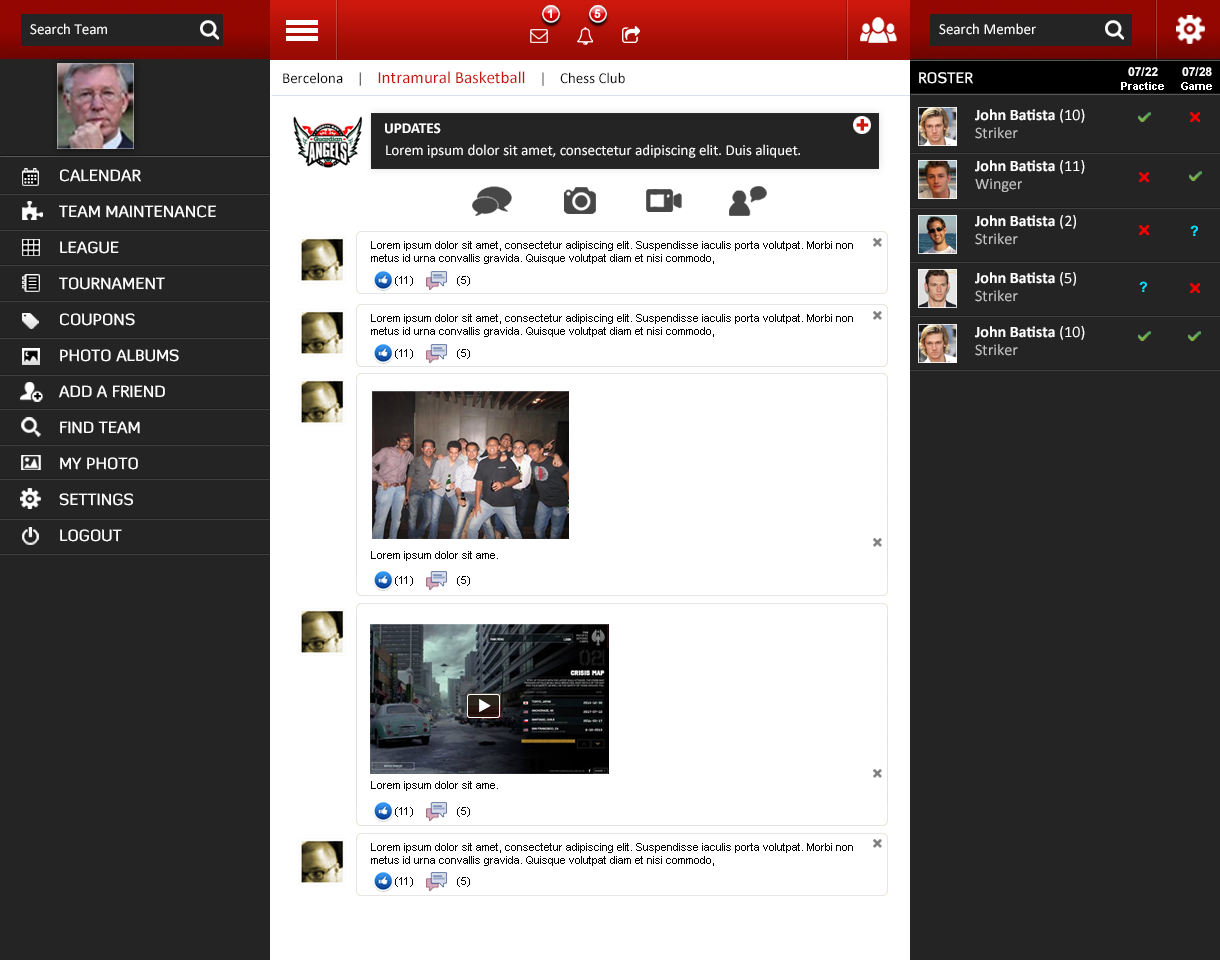
<style>
.page{position:relative;width:1220px;height:960px;background:#242424}
.page>*{position:absolute;margin:0}
.t1{font:12px "Arial-BoldMT";color:#ffffff}
.t2{font:15px "Calibri";color:#ffffff}
.t3{font:17px "Calibri";color:#c6160c}
.t4{font:15px "Calibri";color:#000000}
.t5{font:15px "DiavloMedium-Regular";color:#ffffff;text-transform:uppercase}
.t6{font:11px "Arial-BoldMT";color:#ffffff}
.t7{font:16px "Calibri-Bold";color:#ffffff}
.t8{font:16px "Calibri";color:#ffffff}
.t9{font:15px "Calibri-Bold";color:#ffffff;text-transform:uppercase}
.t10{font:22px "Arial-Black";color:#ce180d;text-transform:uppercase}
.t11{font:16px "Calibri";color:#c4c4c4}
.t12{font:16px/36px "DiavloMedium-Regular";color:#ffffff;text-transform:uppercase}
.t13{font:14px "Arial-BoldMT";color:#00e4ff}
.t14{font:11px "ArialMT";color:#000000}
</style>
<div class="page">
<p class="t1" style="left:548px;top:9px;width:4px;height:9px">1</p>
<p class="t1" style="left:594px;top:9px;width:7px;height:9px">5</p>
<p class="t2" style="left:30px;top:23px;width:77px;height:12px">Search Team</p>
<p class="t2" style="left:939px;top:23px;width:97px;height:12px">Search Member</p>
<p class="t3" style="left:283px;top:71px;width:342px;height:15px"><span class="t4">Bercelona    |    </span>Intramural Basketball <span class="t4">   |    Chess Club</span></p>
<p class="t5" style="left:919px;top:72px;width:54px;height:12px">ROSTER</p>
<p class="t1" style="left:1128px;top:67px;width:30px;height:9px">07/22</p>
<p class="t1" style="left:1182px;top:67px;width:30px;height:9px">07/28</p>
<p class="t6" style="left:1121px;top:82px;width:43px;height:8px">Practice</p>
<p class="t6" style="left:1181px;top:82px;width:31px;height:8px">Game</p>
<p class="t7" style="left:975px;top:109px;width:110px;height:14px">John Batista<span class="t8"> (10)</span></p>
<p class="t9" style="left:385px;top:123px;width:56px;height:11px">updates</p>
<p class="t10" style="left:856px;top:119px;width:13px;height:12px">+</p>
<p class="t11" style="left:975px;top:127px;width:43px;height:12px">Striker</p>
<p class="t2" style="left:386px;top:144px;width:414px;height:14px">Lorem ipsum dolor sit amet, consectetur adipiscing elit. Duis aliquet.</p>
<p class="t7" style="left:975px;top:160px;width:110px;height:14px">John Batista <span class="t8">(11)</span></p>
<p class="t12" style="left:59px;top:169px;width:157px;height:373px">Calendar<br>team maintenance<br>league<br>tournament<br>coupons<br>photo albums<br>add a friend<br>find team<br>my photo<br>Settings<br>Logout</p>
<p class="t11" style="left:975px;top:178px;width:47px;height:14px">Winger</p>
<p class="t7" style="left:975px;top:215px;width:101px;height:14px">John Batista<span class="t8"> (2)</span></p>
<p class="t11" style="left:975px;top:233px;width:43px;height:12px">Striker</p>
<p class="t13" style="left:1190px;top:225px;width:8px;height:11px">?</p>
<p class="t14" style="left:371px;top:241px;width:482px;height:23px">Lorem ipsum dolor sit amet, consectetur adipiscing elit. Suspendisse iaculis porta volutpat. Morbi non metus id urna convallis gravida. Quisque volutpat diam et nisi commodo,</p>
<p class="t14" style="left:395px;top:276px;width:18px;height:10px">(11)</p>
<p class="t14" style="left:457px;top:276px;width:13px;height:10px">(5)</p>
<p class="t7" style="left:975px;top:272px;width:101px;height:14px">John Batista<span class="t8"> (5)</span></p>
<p class="t13" style="left:1139px;top:281px;width:8px;height:11px">?</p>
<p class="t11" style="left:975px;top:290px;width:43px;height:12px">Striker</p>
<p class="t14" style="left:371px;top:314px;width:482px;height:23px">Lorem ipsum dolor sit amet, consectetur adipiscing elit. Suspendisse iaculis porta volutpat. Morbi non metus id urna convallis gravida. Quisque volutpat diam et nisi commodo,</p>
<p class="t7" style="left:975px;top:326px;width:110px;height:14px">John Batista<span class="t8"> (10)</span></p>
<p class="t14" style="left:395px;top:349px;width:18px;height:10px">(11)</p>
<p class="t14" style="left:457px;top:349px;width:13px;height:10px">(5)</p>
<p class="t11" style="left:975px;top:344px;width:43px;height:12px">Striker</p>
<p class="t14" style="left:371px;top:551px;width:127px;height:10px">Lorem ipsum dolor sit ame.</p>
<p class="t14" style="left:395px;top:576px;width:18px;height:10px">(11)</p>
<p class="t14" style="left:457px;top:576px;width:13px;height:10px">(5)</p>
<p class="t14" style="left:371px;top:781px;width:127px;height:10px">Lorem ipsum dolor sit ame.</p>
<p class="t14" style="left:395px;top:807px;width:18px;height:10px">(11)</p>
<p class="t14" style="left:457px;top:807px;width:13px;height:10px">(5)</p>
<p class="t14" style="left:371px;top:843px;width:482px;height:23px">Lorem ipsum dolor sit amet, consectetur adipiscing elit. Suspendisse iaculis porta volutpat. Morbi non metus id urna convallis gravida. Quisque volutpat diam et nisi commodo,</p>
<p class="t14" style="left:395px;top:877px;width:18px;height:10px">(11)</p>
<p class="t14" style="left:457px;top:877px;width:13px;height:10px">(5)</p>
</div>
